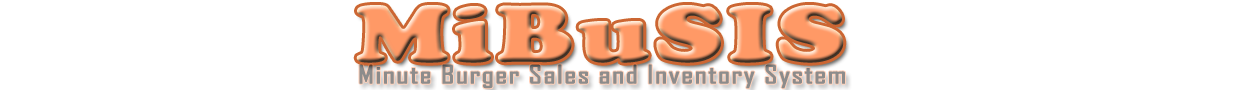
<style>
.page{position:relative;width:1250px;height:90px;background:#ffffff}
.page>*{position:absolute;margin:0}
.t1{font:24px "AgencyFB-Reg";letter-spacing:0.025em;color:#8c8c8c;font-weight:bold;scale:1.32 1}
</style>
<div class="page">
<p class="t1" style="left:359px;top:64px;width:486px;height:25px">Minute Burger Sales and Inventory System</p>
</div>
